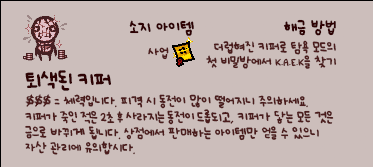
<style>
.page{position:relative;width:373px;height:167px;background:#ccbebb}
.page>*{position:absolute;margin:0}
.t1{font:12px "UhBeeSe_hyunBold";color:#2e0304}
.t2{font:12px "UhBeeSe_hyunBold";letter-spacing:-0.1em;color:#2e0304}
.t3{font:12px "UhBeeSe_hyunBold";letter-spacing:-0.15em;color:#2e0304}
.t4{font:10px/14.5px "UhBeeSe_hyunBold";letter-spacing:-0.025em;color:#4b1c1c}
.t5{font:10px/14.5px "Font_soulsV2_Title-Regular";letter-spacing:-0.025em;color:#4b1c1c}
.t6{font:10px "UhBeeSe_hyunBold";color:#4b1c1c}
.t7{font:10px/15px "UhBeeSe_hyunBold";letter-spacing:-0.025em;color:#4b1c1c}
.t8{font:15.2px/26px "UhBeeSe_hyunBold";letter-spacing:-0.1em;color:#2e0304;scale:1.05 1}
.t9{font:16px/26px "UhBeeSe_hyunBold";letter-spacing:-0.05em;color:#2e0304}
.t10{font:16px/26px "UhBeeSe_hyunBold";letter-spacing:-0.025em;color:#2e0304}
.t11{font:14px/18px "IsaacGame";letter-spacing:-0.025em;color:#4b1c1c}
.t12{font:10px/18px "UhBeeSe_hyunBold";letter-spacing:-0.025em;color:#4b1c1c}
.t13{font:10px/18px "UhBeeSe_hyunBold";letter-spacing:-0.15em;color:#4b1c1c}
.t14{font:10px/16px "UhBeeSe_hyunBold";letter-spacing:-0.075em;color:#4b1c1c}
.t15{font:10px/16px "UhBeeSe_hyunBold";color:#4b1c1c}
.t16{font:10px/16px "UhBeeSe_hyunBold";letter-spacing:-0.025em;color:#4b1c1c}
.t17{font:10px/15px "UhBeeSe_hyunBold";letter-spacing:-0.15em;color:#4b1c1c}
</style>
<div class="page">
<p class="t1" style="left:129px;top:20px;width:65px;height:16px"><span class="t2">소</span>지 아이템</p>
<p class="t1" style="left:283px;top:19px;width:53px;height:17px">해금 방<span class="t3">법</span></p>
<p class="t4" style="left:206px;top:40px;width:131px;height:29px;text-align:right">더럽혀진 키퍼로 탐욕 모드의<br>첫 비밀방에서 <span class="t5">K.A.E.K</span>을 찾기</p>
<p class="t6" style="left:148px;top:47px;width:21px;height:13px">사업</p>
<p class="t7" style="left:25px;top:70px;width:309px;height:85px"><span class="t8">토</span><span class="t9">ㅣ</span><span class="t10">색</span><span class="t9">된 키퍼<br></span><span class="t11">$$$ </span><span class="t12">= </span><span class="t13">체</span><span class="t12">력입니다. 피격 시 동전이 많이 떨어지니 주의하세요.<br></span><span class="t14">키퍼가 죽인 적은 2초 후 사라지는 </span><span class="t15">동전</span><span class="t14">이 </span><span class="t16">드롭되고, 키퍼가 닿는 모든 것은<br></span>금으로 바뀌게 됩니다. <span class="t17">상</span>점에서 판매하는 아이템만 얻을 수 있으니<br>자산 관리에 유의합시다.</p>
</div>
